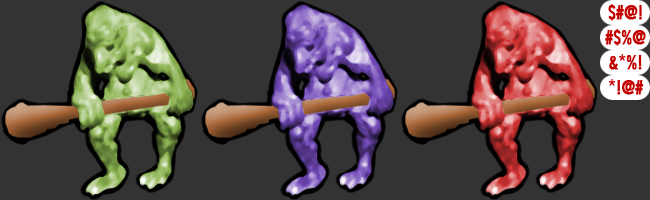
<style>
.page{position:relative;width:650px;height:200px;background:#333333}
.page>*{position:absolute;margin:0}
.t1{font:18px/25px "Futura-CondensedMedium";color:#c30000;font-weight:bold}
</style>
<div class="page">
<p class="t1" style="left:605px;top:4px;width:41px;height:91px;text-align:center">$#@!<br>#$%@<br>&amp;*%!<br>*!@#</p>
</div>
